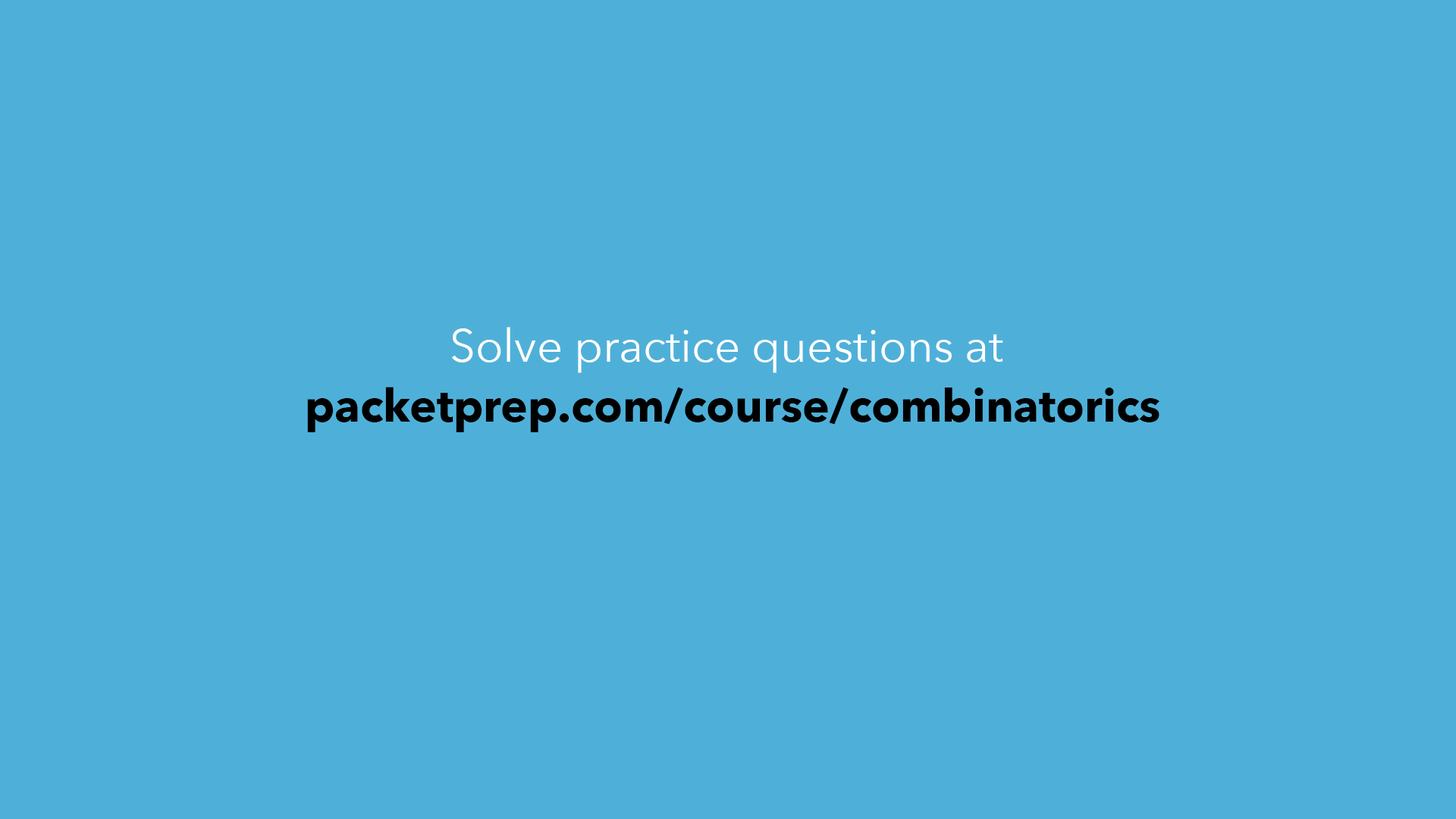
<style>
.page{position:relative;width:1456px;height:819px;background:#4eb0d9}
.page>*{position:absolute;margin:0}
.t1{font:45.5px "AvenirNext-Regular";color:#ffffff}
.t2{font:45.5px "AvenirNext-Bold";color:#000000}
</style>
<div class="page">
<p class="t1" style="left:452px;top:327px;width:551px;height:46px">Solve practice questions at</p>
<p class="t2" style="left:307px;top:387px;width:852px;height:45px">packetprep.com/course/combinatorics</p>
</div>
